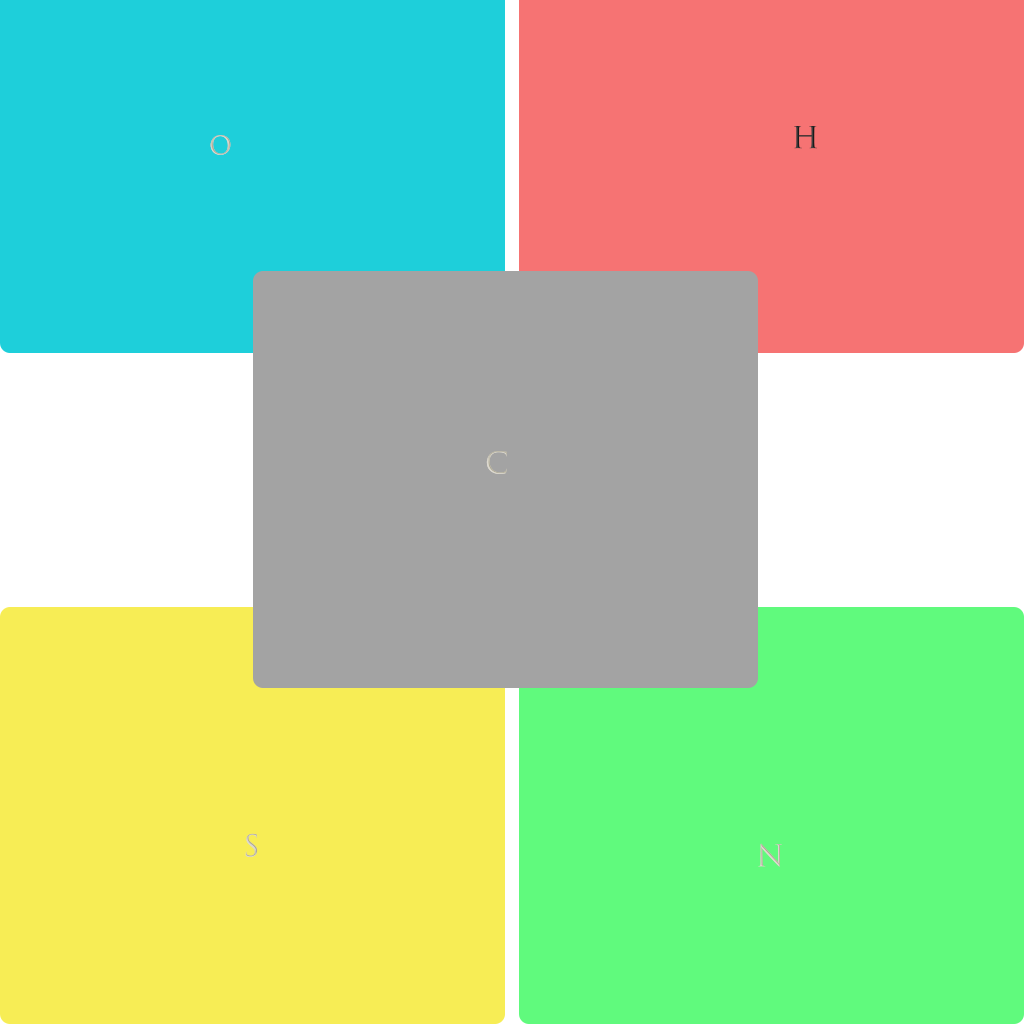
<style>
.page{position:relative;width:1024px;height:1024px}
.page>*{position:absolute;margin:0}
.t1{font:29.2px "TrajanColor-Concept";letter-spacing:0.04em}
.t2{font:24.9px "TrajanColor-Concept";letter-spacing:0.04em;color:#c3c0b2}
</style>
<div class="page">
<p class="t1" style="left:794px;top:126px;width:23px;height:23px">H</p>
<p class="t2" style="left:210px;top:135px;width:21px;height:20px">o</p>
<p class="t1" style="left:486px;top:451px;width:21px;height:23px">c</p>
<p class="t1" style="left:245px;top:833px;width:13px;height:24px">s</p>
<p class="t1" style="left:758px;top:843px;width:24px;height:24px">n</p>
</div>
